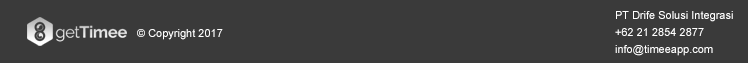
<style>
.page{position:relative;width:748px;height:63px;background:#3a3a3a}
.page>*{position:absolute;margin:0}
.t1{font:11px/17px "ArialMT";color:#ffffff}
.t2{font:11px "ArialMT";color:#ffffff}
</style>
<div class="page">
<p class="t1" style="left:615px;top:11px;width:118px;height:45px">PT Drife Solusi Integrasi<br>+62 21 2854 2877<br>info@timeeapp.com</p>
<p class="t2" style="left:137px;top:29px;width:86px;height:11px">© Copyright 2017</p>
</div>
